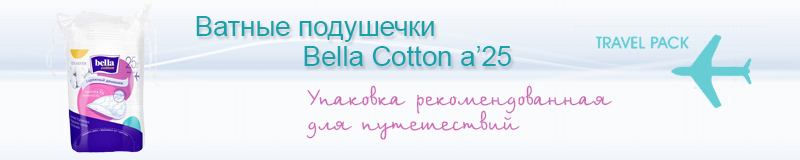
<style>
.page{position:relative;width:800px;height:160px}
.page>*{position:absolute;margin:0}
.t1{font:27.5px "ArialMT";color:#18a2ac}
.t2{font:22.9px "BirchCTT";color:#cf67b4}
</style>
<div class="page">
<p class="t1" style="left:196px;top:16px;width:315px;height:50px;text-align:right">Ватные подушечки<br>   Bella Cotton a’25</p>
<p class="t2" style="left:306px;top:85px;width:306px;height:55px;text-align:right">Упаковка рекомендованная <br>для путешествий</p>
</div>
